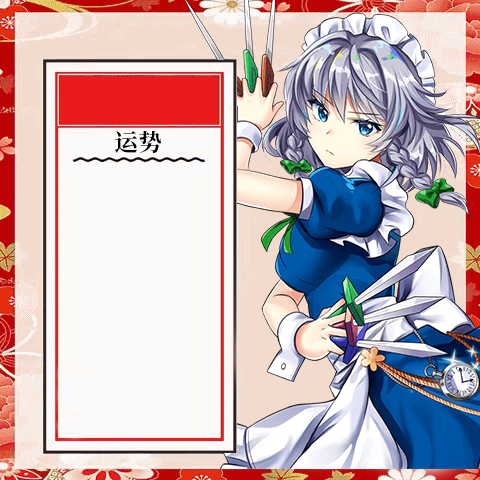
<style>
.page{position:relative;width:480px;height:480px;background:#fcfaf9}
.page>*{position:absolute;margin:0}
.t1{font:24px "NotoSerifSC-Bold";color:#000000}
</style>
<div class="page">
<p class="t1" style="left:115px;top:130px;width:46px;height:23px">运势</p>
</div>
